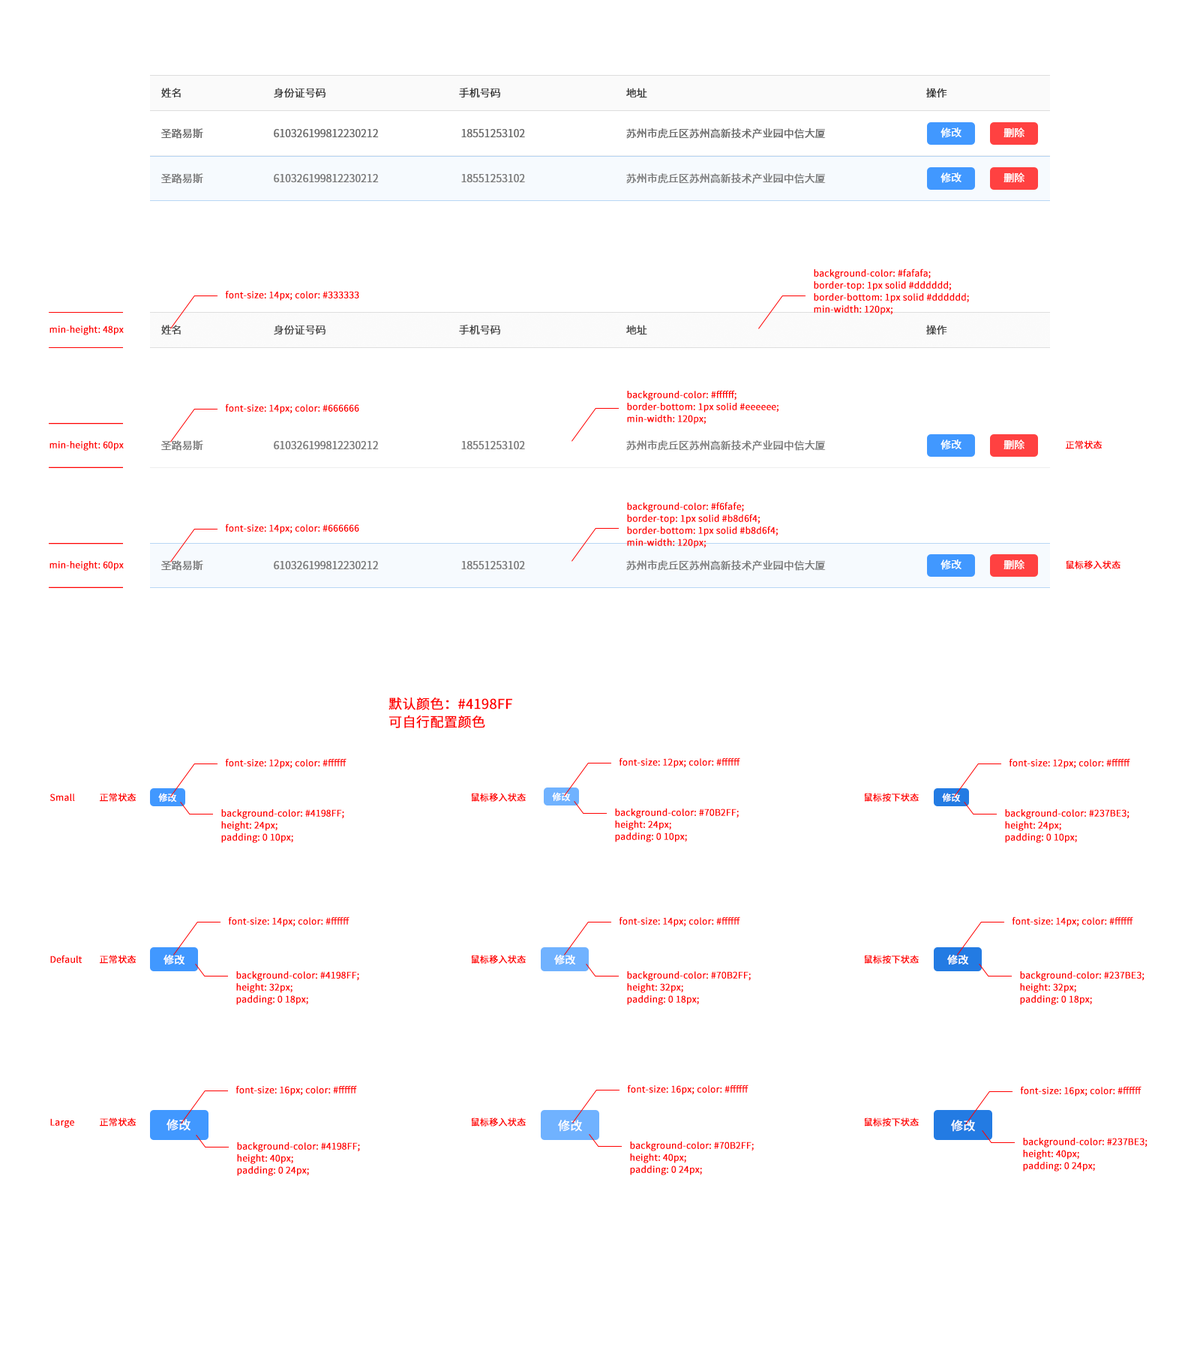
<style>
.page{position:relative;width:1200px;height:1350px;background:#ffffff}
.page>*{position:absolute;margin:0}
.t1{font:9px/12px "SourceHanSansCN-Regular";color:#ff0000;font-weight:bold}
.t2{font:9px "SourceHanSansCN-Regular";color:#ff0000;font-weight:bold}
.t3{font:13.5px/18px "SourceHanSansCN-Regular";color:#ff0000;font-weight:bold}
.t4{font:9px "SourceHanSansCN-Regular";color:#ffffff;font-weight:bold}
.t5{font:10.5px "SourceHanSansCN-Regular";color:#ffffff;font-weight:bold}
.t6{font:12px "SourceHanSansCN-Regular";color:#ffffff;font-weight:bold}
</style>
<div class="page">
<p class="t1" style="left:814px;top:268px;width:155px;height:47px">background-color: #fafafa; <br>border-top: 1px solid #dddddd; <br>border-bottom: 1px solid #dddddd;<br>min-width: 120px;</p>
<p class="t2" style="left:225px;top:290px;width:134px;height:11px">font-size: 14px; color: #333333</p>
<p class="t2" style="left:50px;top:326px;width:74px;height:9px">min-height: 48px</p>
<p class="t1" style="left:627px;top:390px;width:151px;height:34px">background-color: #ffffff; <br>border-bottom: 1px solid #eeeeee;<br>min-width: 120px;</p>
<p class="t2" style="left:225px;top:404px;width:134px;height:10px">font-size: 14px; color: #666666</p>
<p class="t2" style="left:50px;top:441px;width:74px;height:10px">min-height: 60px</p>
<p class="t2" style="left:1066px;top:440px;width:36px;height:9px">正常状态</p>
<p class="t1" style="left:627px;top:502px;width:151px;height:46px">background-color: #f6fafe; <br>border-top: 1px solid #b8d6f4;<br>border-bottom: 1px solid #b8d6f4;<br>min-width: 120px;</p>
<p class="t2" style="left:225px;top:524px;width:134px;height:10px">font-size: 14px; color: #666666</p>
<p class="t2" style="left:50px;top:561px;width:74px;height:10px">min-height: 60px</p>
<p class="t2" style="left:1066px;top:560px;width:54px;height:9px">鼠标移入状态</p>
<p class="t3" style="left:388px;top:697px;width:124px;height:31px">默认颜色：#4198FF<br>可自行配置颜色</p>
<p class="t2" style="left:225px;top:758px;width:121px;height:11px">font-size: 12px; color: #ffffff</p>
<p class="t2" style="left:619px;top:758px;width:121px;height:10px">font-size: 12px; color: #ffffff</p>
<p class="t2" style="left:1009px;top:758px;width:121px;height:11px">font-size: 12px; color: #ffffff</p>
<p class="t2" style="left:50px;top:794px;width:25px;height:7px">Small</p>
<p class="t2" style="left:100px;top:793px;width:36px;height:9px">正常状态</p>
<p class="t4" style="left:158px;top:793px;width:19px;height:9px">修改</p>
<p class="t2" style="left:471px;top:793px;width:55px;height:9px">鼠标移入状态</p>
<p class="t4" style="left:552px;top:792px;width:19px;height:10px">修改</p>
<p class="t2" style="left:864px;top:793px;width:55px;height:9px">鼠标按下状态</p>
<p class="t4" style="left:942px;top:793px;width:19px;height:9px">修改</p>
<p class="t1" style="left:221px;top:809px;width:123px;height:34px">background-color: #4198FF;<br>height: 24px;<br>padding: 0 10px;</p>
<p class="t1" style="left:615px;top:808px;width:124px;height:34px">background-color: #70B2FF;<br>height: 24px;<br>padding: 0 10px;</p>
<p class="t1" style="left:1005px;top:809px;width:125px;height:34px">background-color: #237BE3;<br>height: 24px;<br>padding: 0 10px;</p>
<p class="t2" style="left:228px;top:916px;width:122px;height:11px">font-size: 14px; color: #ffffff</p>
<p class="t2" style="left:619px;top:916px;width:121px;height:11px">font-size: 14px; color: #ffffff</p>
<p class="t2" style="left:1012px;top:916px;width:121px;height:11px">font-size: 14px; color: #ffffff</p>
<p class="t2" style="left:50px;top:955px;width:32px;height:8px">Default</p>
<p class="t2" style="left:100px;top:955px;width:36px;height:9px">正常状态</p>
<p class="t5" style="left:164px;top:955px;width:21px;height:9px">修改</p>
<p class="t2" style="left:471px;top:955px;width:55px;height:9px">鼠标移入状态</p>
<p class="t5" style="left:554px;top:955px;width:22px;height:9px">修改</p>
<p class="t2" style="left:864px;top:955px;width:55px;height:9px">鼠标按下状态</p>
<p class="t5" style="left:947px;top:955px;width:22px;height:9px">修改</p>
<p class="t1" style="left:236px;top:971px;width:123px;height:34px">background-color: #4198FF;<br>height: 32px;<br>padding: 0 18px;</p>
<p class="t1" style="left:627px;top:971px;width:124px;height:34px">background-color: #70B2FF;<br>height: 32px;<br>padding: 0 18px;</p>
<p class="t1" style="left:1020px;top:971px;width:124px;height:34px">background-color: #237BE3;<br>height: 32px;<br>padding: 0 18px;</p>
<p class="t2" style="left:236px;top:1085px;width:121px;height:11px">font-size: 16px; color: #ffffff</p>
<p class="t2" style="left:627px;top:1084px;width:121px;height:11px">font-size: 16px; color: #ffffff</p>
<p class="t2" style="left:1020px;top:1086px;width:122px;height:10px">font-size: 16px; color: #ffffff</p>
<p class="t2" style="left:50px;top:1118px;width:24px;height:10px">Large</p>
<p class="t2" style="left:100px;top:1118px;width:36px;height:8px">正常状态</p>
<p class="t6" style="left:166px;top:1119px;width:24px;height:12px">修改</p>
<p class="t2" style="left:471px;top:1118px;width:55px;height:8px">鼠标移入状态</p>
<p class="t6" style="left:558px;top:1120px;width:24px;height:12px">修改</p>
<p class="t2" style="left:864px;top:1118px;width:55px;height:8px">鼠标按下状态</p>
<p class="t6" style="left:951px;top:1120px;width:24px;height:12px">修改</p>
<p class="t1" style="left:237px;top:1142px;width:123px;height:34px">background-color: #4198FF;<br>height: 40px;<br>padding: 0 24px;</p>
<p class="t1" style="left:630px;top:1142px;width:124px;height:33px">background-color: #70B2FF;<br>height: 40px;<br>padding: 0 24px;</p>
<p class="t1" style="left:1023px;top:1138px;width:125px;height:34px">background-color: #237BE3;<br>height: 40px;<br>padding: 0 24px;</p>
</div>
